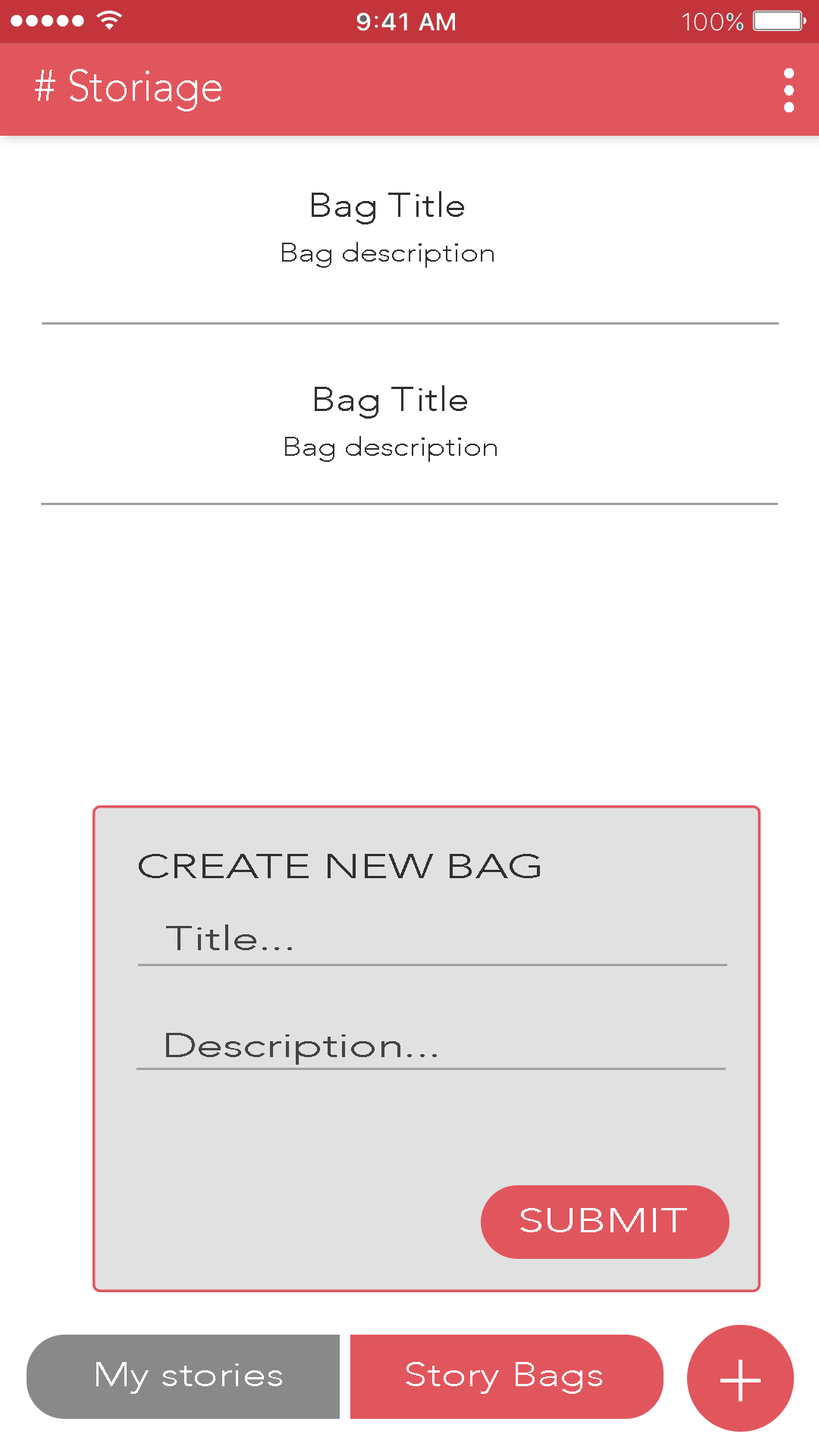
<style>
.page{position:relative;width:819px;height:1456px;background:#ffffff}
.page>*{position:absolute;margin:0}
.t1{font:44px "Avenir-Light";color:#ffffff;scale:0.95 1}
.t2{font:26.5px "Avenir-Light";color:#313030;scale:1.17 1}
.t3{font:34.1px "Avenir-Light";color:#313030;scale:1.17 1}
.t4{font:34.1px "Avenir-Light";color:#313030;scale:1.39 1}
.t5{font:34.1px "Avenir-Light";color:#444444;scale:1.39 1}
.t6{font:34.1px "Avenir-Light";color:#ffffff;scale:1.39 1}
</style>
<div class="page">
<p class="t1" style="left:35px;top:69px;width:186px;height:42px"># Storiage</p>
<p class="t2" style="left:282px;top:191px;width:212px;height:77px;text-align:center"><span class="t3">Bag Title<br></span>Bag description</p>
<p class="t2" style="left:285px;top:385px;width:212px;height:77px;text-align:center"><span class="t3">Bag Title<br></span>Bag description</p>
<p class="t4" style="left:139px;top:854px;width:401px;height:24px">CREATE NEW BAG</p>
<p class="t5" style="left:166px;top:924px;width:126px;height:26px">Title...</p>
<p class="t5" style="left:166px;top:1033px;width:271px;height:32px">Description...</p>
<p class="t6" style="left:520px;top:1208px;width:167px;height:24px">SUBMIT</p>
</div>
